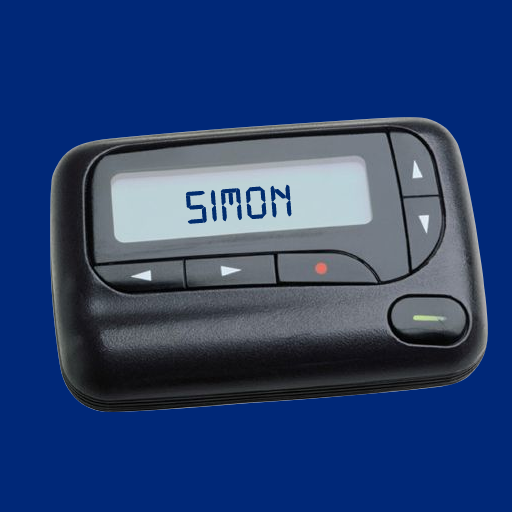
<style>
.page{position:relative;width:512px;height:512px;background:#002878}
.page>*{position:absolute;margin:0}
.t1{font:48px "Digital-7";letter-spacing:0.02em;color:#012c6d;font-weight:bold}
</style>
<div class="page">
<p class="t1" style="left:185px;top:184px;width:107px;height:40px;rotate:-4deg">SIMON</p>
</div>
